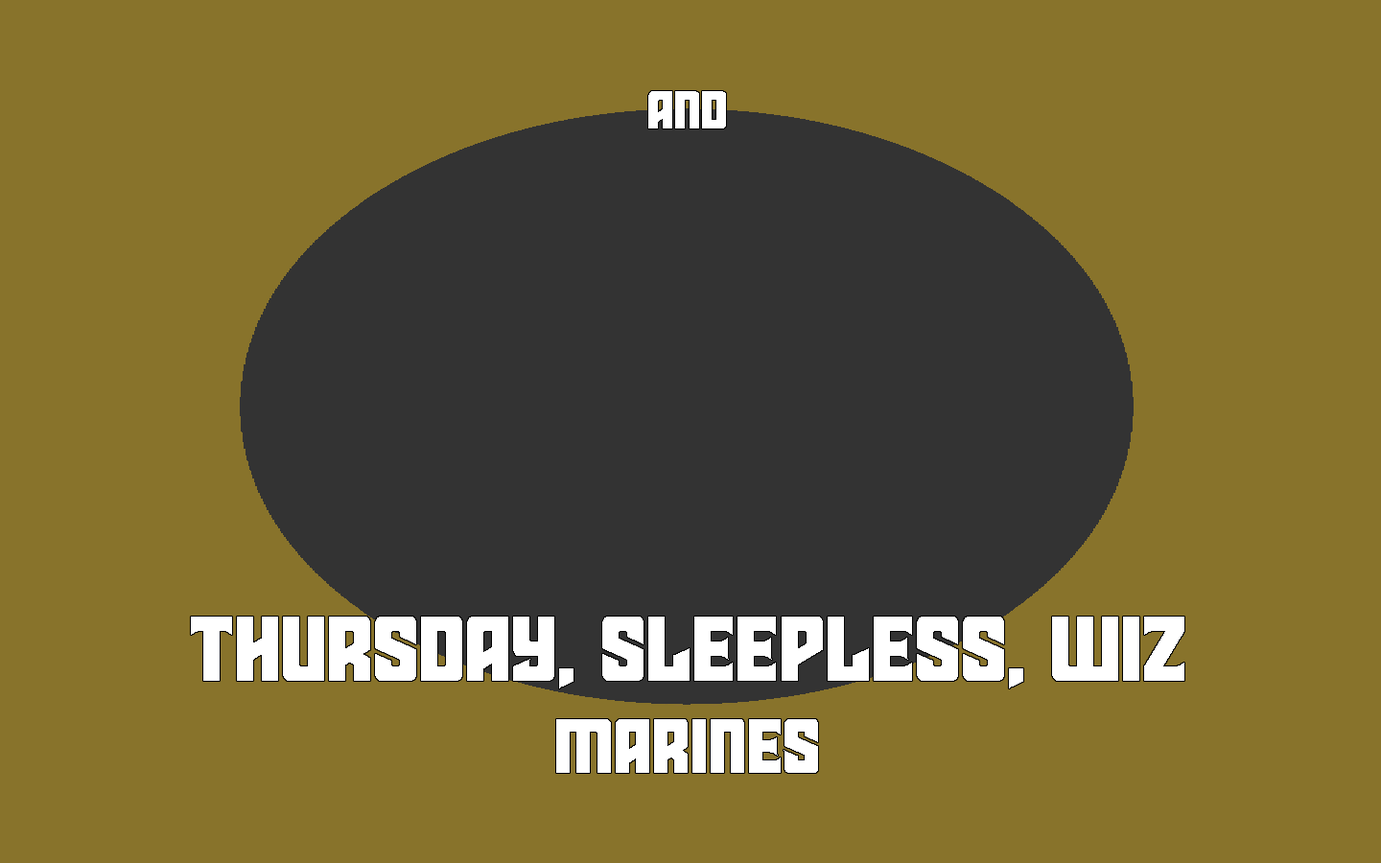
<style>
.page{position:relative;width:1381px;height:863px;background:#88732b}
.page>*{position:absolute;margin:0}
.t1{font:92.1px "StarGuard";letter-spacing:0.009em;color:#ffffff}
.t2{font:61.4px "StarGuard";letter-spacing:0.009em;color:#ffffff}
.t3{font:76.7px "StarGuard";letter-spacing:0.009em;color:#ffffff}
</style>
<div class="page">
<p class="t1" style="left:191px;top:91px;width:994px;height:682px;text-align:center"><span class="t2">and<br></span><br><br><br><br>THURSDAY, SLEEPLESS, WIZ<br><span class="t3">MARINES</span></p>
</div>
